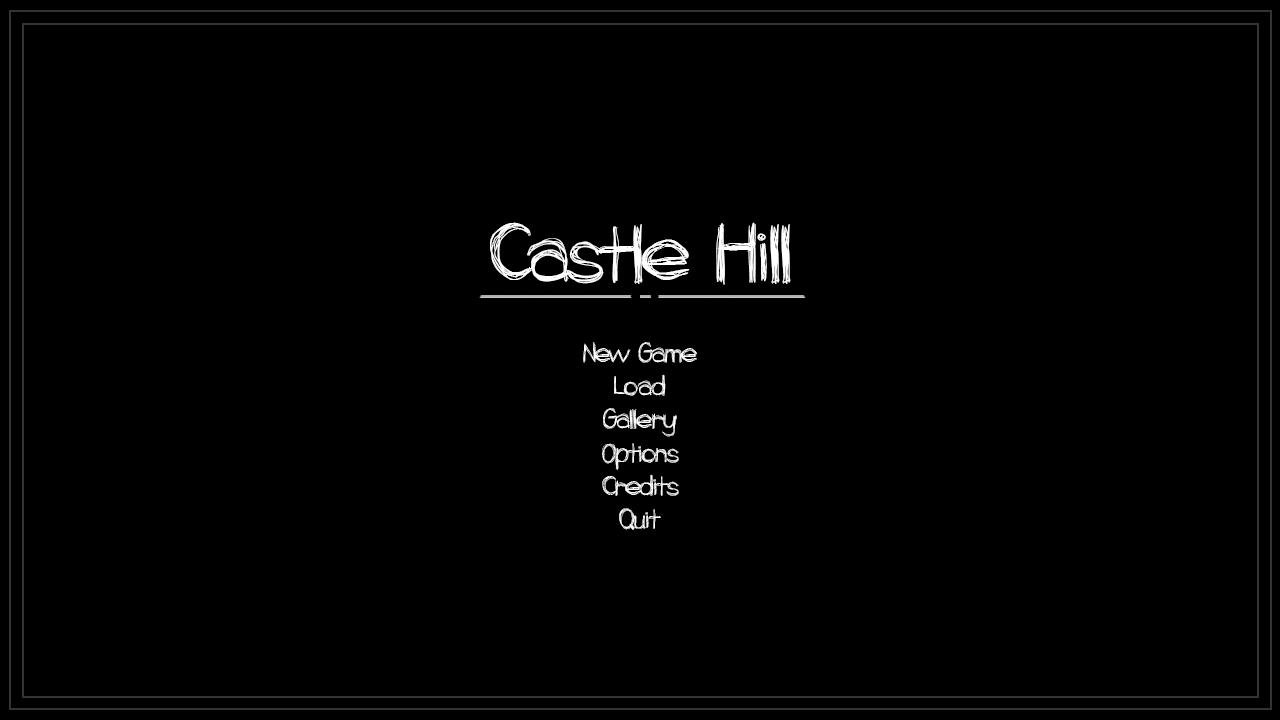
<style>
.page{position:relative;width:1280px;height:720px;background:#000000}
.page>*{position:absolute;margin:0}
.t1{font:72px "AppleSpice";color:#ffffff}
.t2{font:24px "AppleSpice";color:#ffffff}
</style>
<div class="page">
<p class="t1" style="left:490px;top:222px;width:301px;height:63px">Castle  Hill</p>
<p class="t2" style="left:583px;top:342px;width:114px;height:21px">New  Game</p>
<p class="t2" style="left:614px;top:374px;width:52px;height:22px">Load</p>
<p class="t2" style="left:603px;top:408px;width:74px;height:29px">Gallery</p>
<p class="t2" style="left:602px;top:443px;width:77px;height:27px">Options</p>
<p class="t2" style="left:602px;top:474px;width:77px;height:22px">Credits</p>
<p class="t2" style="left:619px;top:508px;width:42px;height:22px">Quit</p>
</div>
